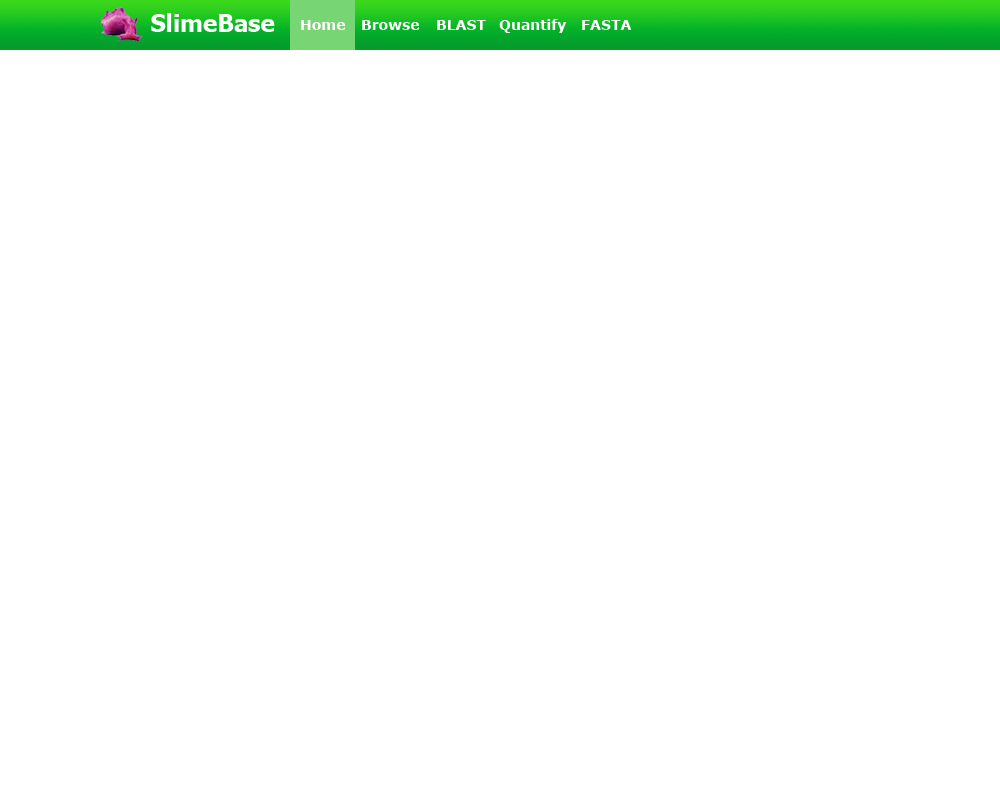
<style>
.page{position:relative;width:1000px;height:800px;background:#ffffff}
.page>*{position:absolute;margin:0}
.t1{font:24px "Tahoma-Bold";color:#ffffff}
.t2{font:14px "Verdana-Bold";color:#ffffff}
</style>
<div class="page">
<p class="t1" style="left:151px;top:13px;width:124px;height:19px">SlimeBase</p>
<p class="t2" style="left:301px;top:20px;width:44px;height:10px">Home</p>
<p class="t2" style="left:362px;top:20px;width:57px;height:10px">Browse</p>
<p class="t2" style="left:437px;top:20px;width:49px;height:10px">BLAST</p>
<p class="t2" style="left:499px;top:19px;width:67px;height:14px">Quantify</p>
<p class="t2" style="left:582px;top:20px;width:50px;height:10px">FASTA</p>
</div>
